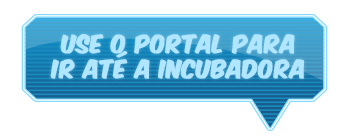
<style>
.page{position:relative;width:350px;height:140px;background:#ffffff}
.page>*{position:absolute;margin:0}
.t1{font:21.5px "KomikaAxis";color:#b0e6ff;font-weight:bold}
</style>
<div class="page">
<p class="t1" style="left:50px;top:34px;width:255px;height:45px;text-align:center">USE O PORTAL PARA<br>IR ATÉ A INCUBADORA</p>
</div>
